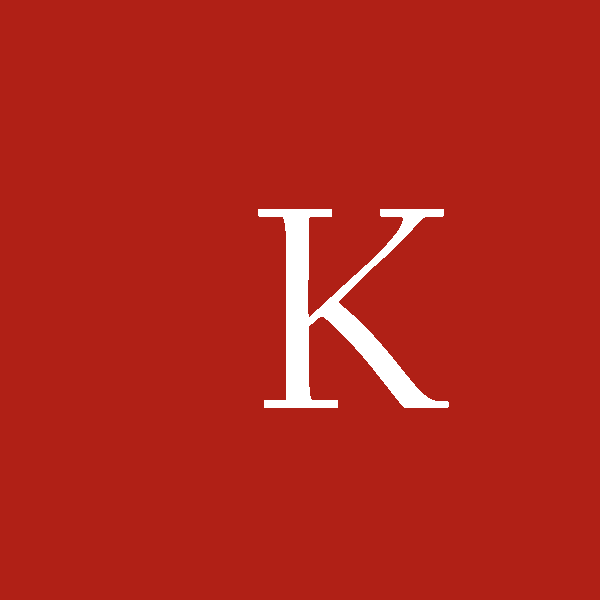
<style>
.page{position:relative;width:600px;height:600px;background:#b02016}
.page>*{position:absolute;margin:0}
.t1{font:300px "CalifornianFB-Reg";letter-spacing:0.075em;color:#ffffff}
</style>
<div class="page">
<p class="t1" style="left:258px;top:209px;width:191px;height:199px">K</p>
</div>
